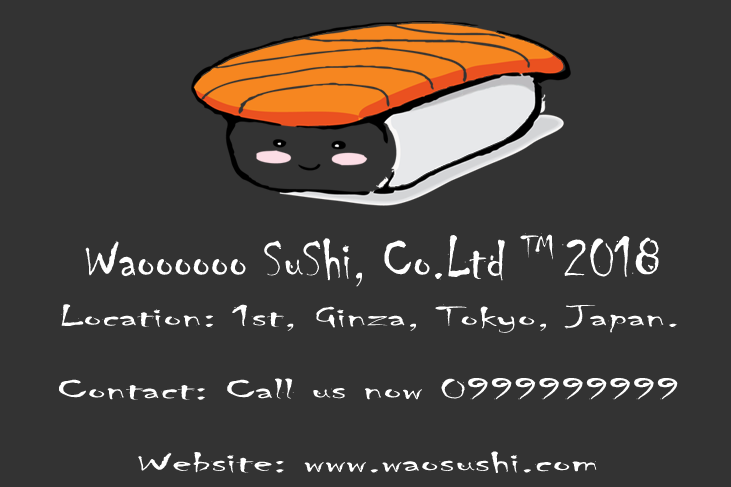
<style>
.page{position:relative;width:731px;height:487px;background:#333333}
.page>*{position:absolute;margin:0}
.t1{font:58.3px "Chiller-Regular";color:#ffffff}
.t2{font:30.3px "Chiller-Regular";color:#ffffff;scale:1.94 1}
</style>
<div class="page">
<p class="t1" style="left:85px;top:233px;width:574px;height:54px">Waoooooo SuShi, Co.Ltd TM 2018</p>
<p class="t2" style="left:59px;top:304px;width:619px;height:169px">Location: 1st, Ginza, Tokyo, Japan.<br><br>Contact: Call us now 0999999999<br><br>Website: www.waosushi.com</p>
</div>
